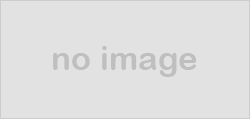
<style>
.page{position:relative;width:250px;height:119px;background:#e2e2e2}
.page>*{position:absolute;margin:0}
.t1{font:33.3px "ArialRoundedMTBold";color:#c0bfbf}
</style>
<div class="page">
<p class="t1" style="left:53px;top:46px;width:144px;height:31px">no image</p>
</div>
